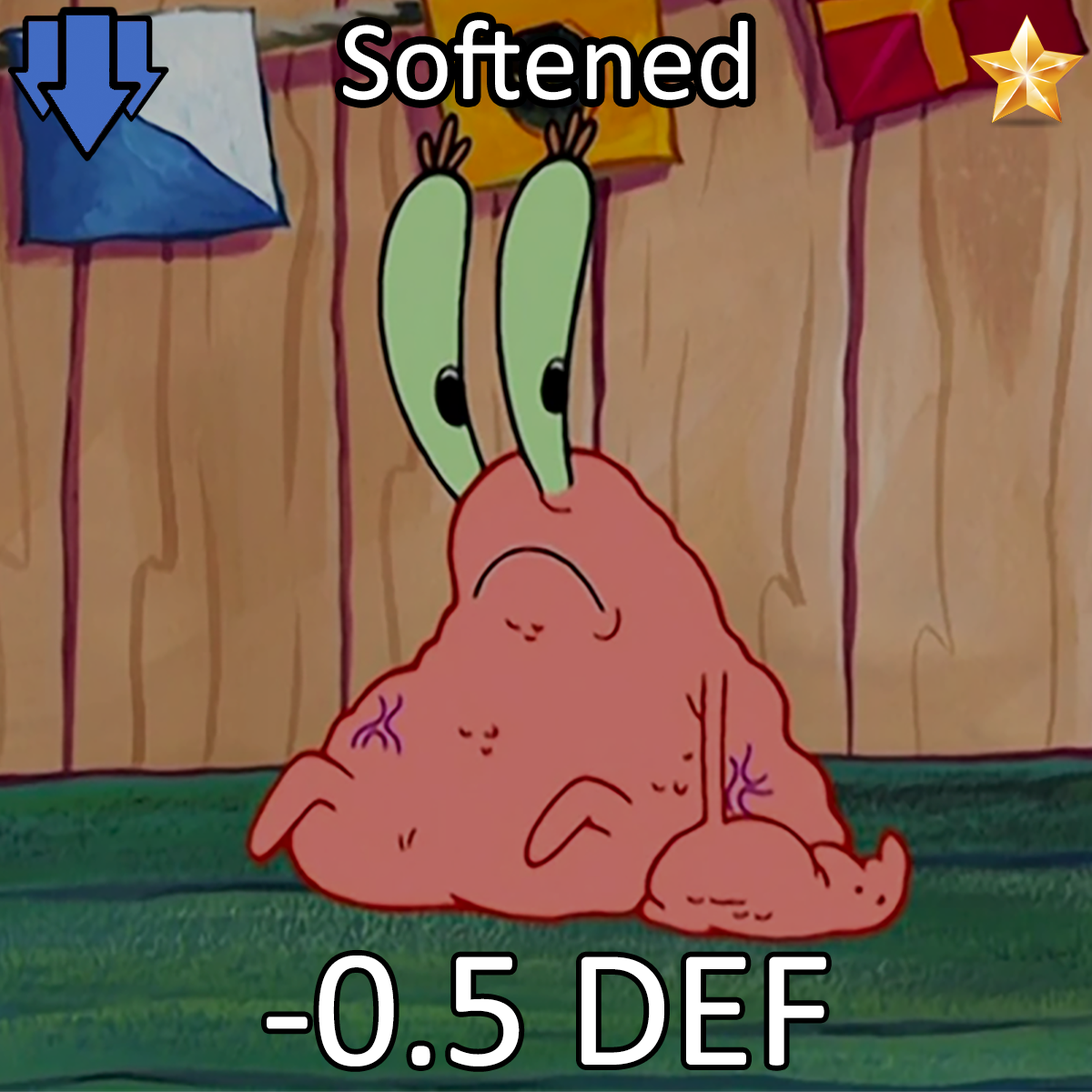
<style>
.page{position:relative;width:1092px;height:1092px}
.page>*{position:absolute;margin:0}
.t1{font:196.6px "Calibri";color:#ffffff}
.t2{font:292.1px "Calibri";color:#ffffff}
</style>
<div class="page">
<p class="t1" style="left:343px;top:20px;width:405px;height:80px">Softened</p>
<p class="t2" style="left:267px;top:955px;width:559px;height:112px">-0.5 DEF</p>
</div>
